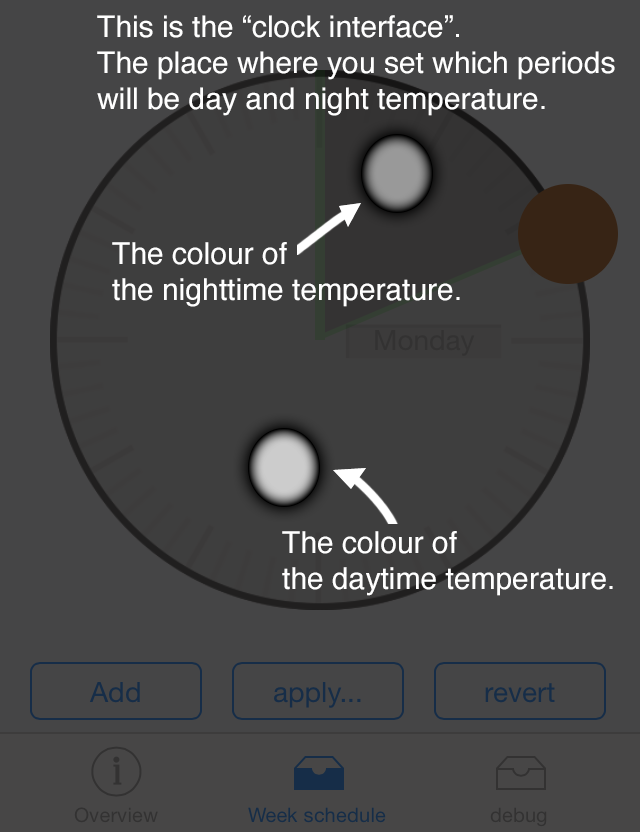
<style>
.page{position:relative;width:640px;height:832px;background:#454546}
.page>*{position:absolute;margin:0}
.t1{font:30px "Helvetica";color:#ffffff}
</style>
<div class="page">
<p class="t1" style="left:97px;top:15px;width:518px;height:101px">This is the “clock interface”.<br>The place where you set which periods will be day and night temperature.</p>
<p class="t1" style="left:112px;top:242px;width:348px;height:65px">The colour of<br>the nighttime temperature.</p>
<p class="t1" style="left:282px;top:531px;width:331px;height:65px">The colour of<br>the daytime temperature.</p>
</div>
